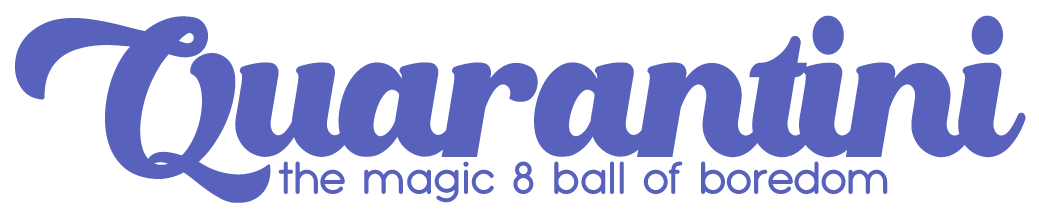
<style>
.page{position:relative;width:1039px;height:216px;background:#ffffff}
.page>*{position:absolute;margin:0}
.t1{font:187.5px "Oaklash";letter-spacing:-0.05em;color:#5862bd;scale:0.8 1}
.t2{font:44px "TypoGroteskRounded";color:#5862bd}
</style>
<div class="page">
<p class="t1" style="left:15px;top:15px;width:1011px;height:188px">Quarantini</p>
<p class="t2" style="left:278px;top:161px;width:610px;height:42px">the magic 8 ball of boredom</p>
</div>
